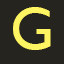
<style>
.page{position:relative;width:64px;height:64px;background:#26241e}
.page>*{position:absolute;margin:0}
.t1{font:60px "GillSansMT";color:#fff461}
</style>
<div class="page">
<p class="t1" style="left:13px;top:7px;width:38px;height:43px">G</p>
</div>
